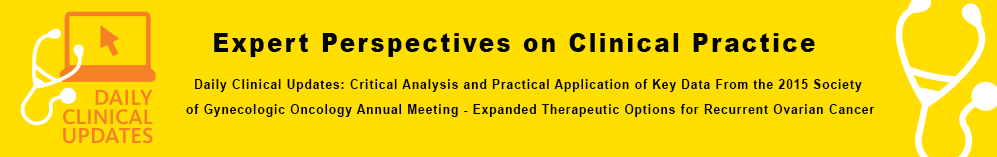
<style>
.page{position:relative;width:997px;height:157px;background:#ffde00}
.page>*{position:absolute;margin:0}
.t1{font:26px "Arial-Black";letter-spacing:0.1em;color:#000000;scale:0.89 1}
.t2{font:13px/25px "Arial-BoldMT";letter-spacing:0.1em;color:#000000;scale:0.89 1}
</style>
<div class="page">
<p class="t1" style="left:214px;top:33px;width:601px;height:24px">Expert Perspectives on Clinical Practice</p>
<p class="t2" style="left:186px;top:79px;width:689px;height:38px;text-align:center">Daily Clinical Updates: Critical Analysis and Practical Application of Key Data From the 2015 Society <br>of Gynecologic Oncology Annual Meeting - Expanded Therapeutic Options for Recurrent Ovarian Cancer</p>
</div>
